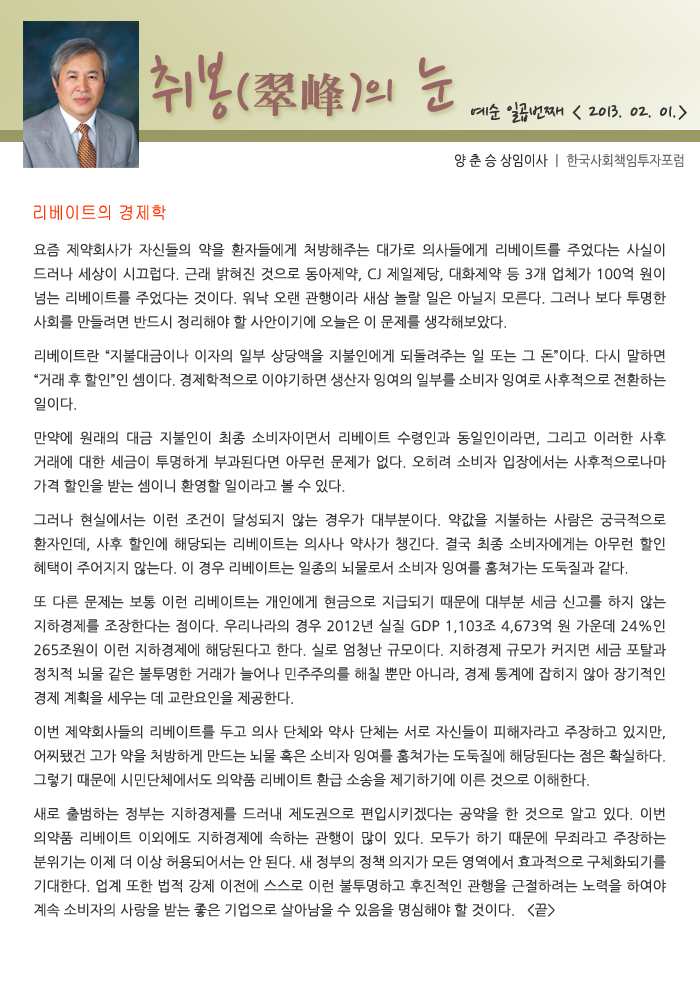
<style>
.page{position:relative;width:700px;height:992px;background:#ffffff}
.page>*{position:absolute;margin:0}
.t1{font:77.5px "NanumPen";color:#996666}
.t2{font:60px "NanumPen";color:#996666}
.t3{font:48px "H2mjrE";color:#996666}
.t4{font:24px "NanumPen";color:#333333}
.t5{font:14px "NanumGothic";color:#666666;scale:0.9 1}
.t6{font:14px "NanumGothic";color:#333333;scale:0.9 1}
.t7{font:18px "Gulim";color:#ff3300;scale:0.9 1}
.t8{font:14px/24px "NanumGothic";color:#333333}
.t9{font:14px/10px "NanumGothic";color:#333333}
</style>
<div class="page">
<p class="t1" style="left:150px;top:51px;width:304px;height:69px">취봉<span class="t2">(</span><span class="t3">翠峰</span><span class="t2">)</span><span class="t2">의</span> 눈</p>
<p class="t4" style="left:471px;top:101px;width:216px;height:22px">예순 일곱번째 &lt; 2013. 02. 01.&gt;</p>
<p class="t5" style="left:455px;top:154px;width:229px;height:14px"><span class="t6">양 춘 승 상임이사 </span>ㅣ 한국사회책임투자포럼</p>
<p class="t7" style="left:34px;top:205px;width:132px;height:15px">리베이트의 경제학</p>
<p class="t8" style="left:33px;top:243px;width:633px;height:674px;text-align:justify">요즘 제약회사가 자신들의 약을 환자들에게 처방해주는 대가로 의사들에게 리베이트를 주었다는 사실이 드러나 세상이 시끄럽다. 근래 밝혀진 것으로 동아제약, CJ 제일제당, 대화제약 등 3개 업체가 100억 원이 넘는 리베이트를 주었다는 것이다. 워낙 오랜 관행이라 새삼 놀랄 일은 아닐지 모른다. 그러나 보다 투명한 사회를 만들려면 반<span class="t9">드시 정리해야 할 사안이기에 오늘은 이 문제를 생각해보았다.<br><br>리베이트란 “</span>지불대금이나 이자의 일부 상당액을 지불인에게 되돌려주는 일 또는 그 돈”이다. 다시 말하면 “거래 후 할인”인 셈이다. 경제학적으로 이야기하면 생산자 잉여의 일부를 소비자 잉여로 사후적으로 전환하는 일이<span class="t9">다. <br><br>만약에 원래</span>의 대금 지불인이 최종 소비자이면서 리베이트 수령인과 동일인이라면, 그리고 이러한 사후 거래에 대한 세금이 투명하게 부과된다면 아무런 문제가 없다. 오히려 소비자 입장에서는 사후적으로나마 가격 할인을 받는 셈이니 환영할 <span class="t9">일이라고 볼 수 있다.<br><br>그러나 현실에서는 이런 조건이 달성되</span>지 않는 경우가 대부분이다. 약값을 지불하는 사람은 궁극적으로 환자인데, 사후 할인에 해당되는 리베이트는 의사나 약사가 챙긴다. 결국 최종 소비자에게는 아무런 할인 혜택이 주어지지 않는다. 이 경우 리베이트는 일종의 뇌물로서 <span class="t9">소비자 잉여를 훔쳐가는 도둑질과 같다.<br><br>또 다른 문제는 보통 이런 리베이트는 개인에게 현금으로 지급되기</span> 때문에 대부분 세금 신고를 하지 않는 지하경제를 조장한다는 점이다. 우리나라의 경우 2012년 실질 GDP 1,103조 4,673억 원 가운데 24%인 265조원이 이런 지하경제에 해당된다고 한다. 실로 엄청난 규모이다. 지하경제 규모가 커지면 세금 포탈과 정치적 뇌물 같은 불투명한 거래가 늘어나 민주주의를 해칠 뿐만 아니라, 경제 통계에 잡히지 않아 장기적인 경제 계획을 세우<span class="t9">는 데 교란요인을 제공한다.<br><br>이번 제약회사들의 리베이트를 두</span>고 의사 단체와 약사 단체는 서로 자신들이 피해자라고 주장하고 있지만, 어찌됐건 고가 약을 처방하게 만드는 뇌물 혹은 소비자 잉여를 훔쳐가는 도둑질에 해당된다는 점은 확실하다. 그렇기 때문에 시민단체에서도 의약품 리베<span class="t9">이트 환급 소송을 제기하기에 이른 것으로 이해한다.<br><br>새로 출범하는 정부는 지하경제를 드러내 제도권으로 편</span>입시키겠다는 공약을 한 것으로 알고 있다. 이번 의약품 리베이트 이외에도 지하경제에 속하는 관행이 많이 있다. 모두가 하기 때문에 무죄라고 주장하는 분위기는 이제 더 이상 허용되어서는 안 된다. 새 정부의 정책 의지가 모든 영역에서 효과적으로 구체화되기를 기대한다. 업계 또한 법적 강제 이전에 스스로 이런 불투명하고 후진적인 관행을 근절하려는 노력을 하여야 계속 소비자의 사랑을 받는 좋은 기업으로 살아남을 수 있음을 명심해야 할 것이다.   &lt;끝&gt;</p>
</div>
